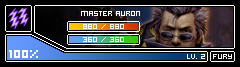
<style>
.page{position:relative;width:240px;height:67px;background:#000000}
.page>*{position:absolute;margin:0}
.t1{font:8px "Hooge0555";color:#ffffff}
</style>
<div class="page">
<p class="t1" style="left:81px;top:11px;width:59px;height:5px">MASTER AURON</p>
<p class="t1" style="left:83px;top:24px;width:41px;height:5px">880 / 880</p>
<p class="t1" style="left:83px;top:37px;width:41px;height:5px">360 / 360</p>
<p class="t1" style="left:187px;top:54px;width:18px;height:5px">lv. 2</p>
<p class="t1" style="left:213px;top:54px;width:19px;height:5px">fury</p>
</div>
